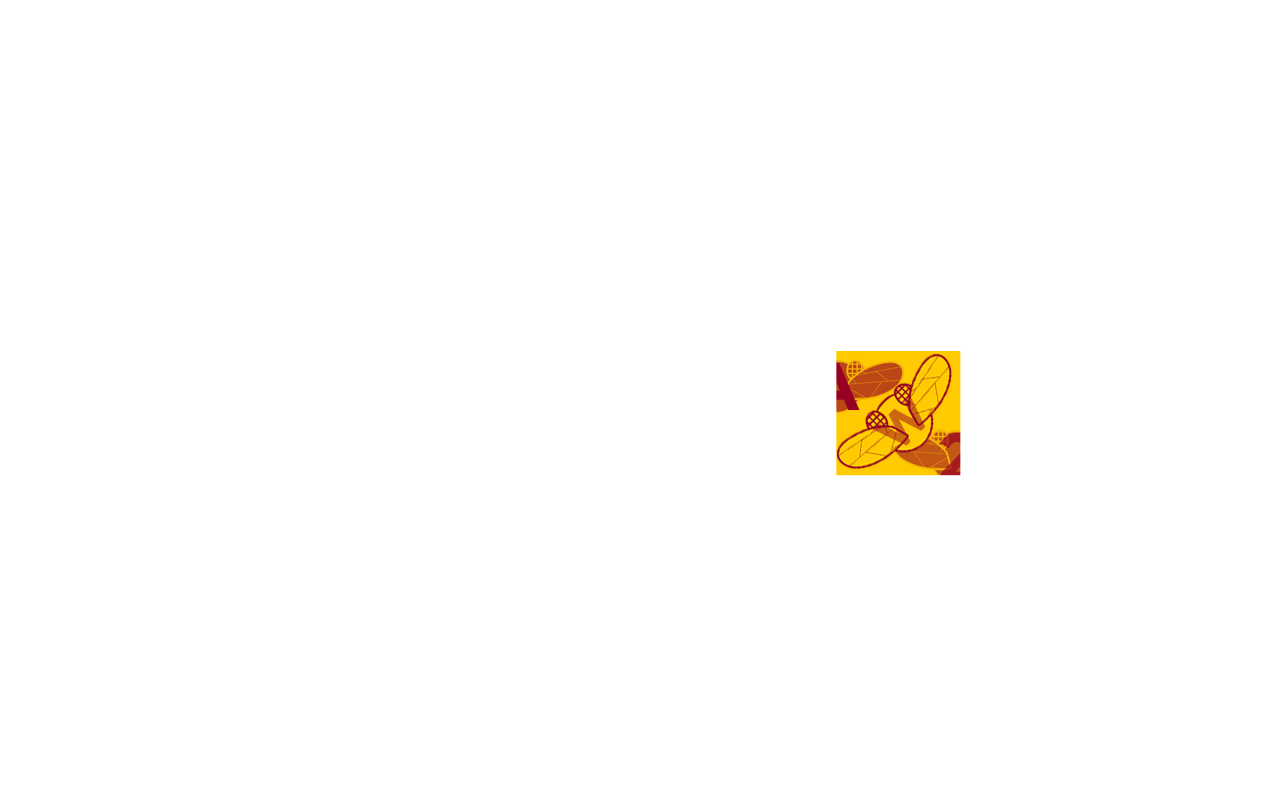
<style>
.page{position:relative;width:1280px;height:800px;background:#ffffff}
.page>*{position:absolute;margin:0}
.t1{font:49.5px "Montserrat-Bold";color:#cb6611}
</style>
<div class="page">
<p class="t1" style="left:873px;top:393px;width:53px;height:53px;rotate:-45deg">W</p>
</div>
